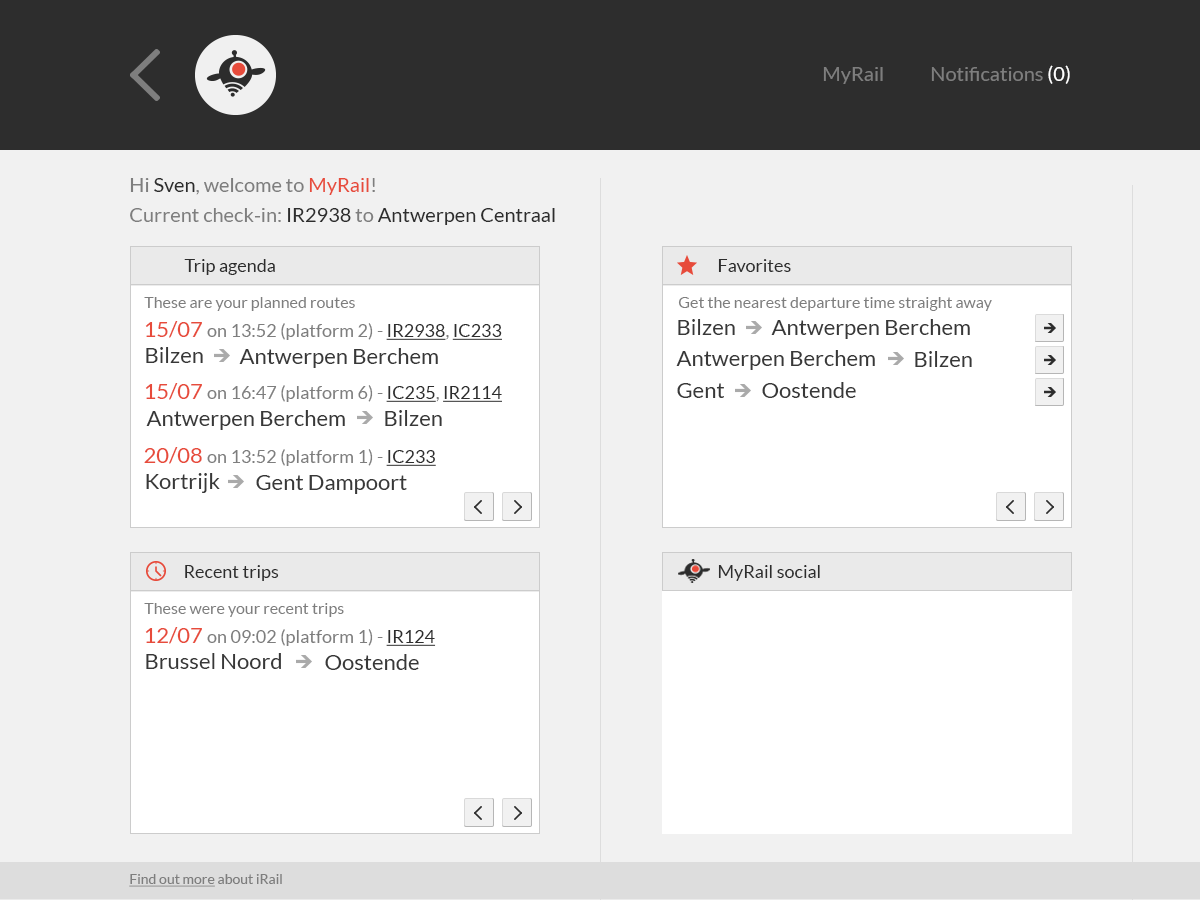
<style>
.page{position:relative;width:1200px;height:900px;background:#f1f1f1}
.page>*{position:absolute;margin:0}
.t1{font:20px "Lato-Regular";color:#7e7e7e}
.t2{font:20px "Lato-Regular";color:#ffffff}
.t3{font:20px/30px "Lato-Regular";color:#7e7e7e}
.t4{font:20px/30px "Lato-Regular";color:#2d2d2d}
.t5{font:20px/30px "Lato-Regular";color:#e74b3b}
.t6{font:18px "Lato-Regular";color:#2d2d2d}
.t7{font:16px "Lato-Regular";color:#7e7e7e}
.t8{font:18px "Lato-Regular";color:#7e7e7e}
.t9{font:22px "Lato-Regular";color:#e74b3b}
.t10{font:18px "Lato-Regular";color:#2d2d2d;text-decoration:underline}
.t11{font:22px "Lato-Regular";color:#383838}
.t12{font:14px "Lato-Regular";color:#7e7e7e;text-decoration:underline}
.t13{font:14px "Lato-Regular";color:#7e7e7e}
</style>
<div class="page">
<p class="t1" style="left:931px;top:65px;width:139px;height:19px">Notifications <span class="t2">(0)</span></p>
<p class="t1" style="left:823px;top:67px;width:60px;height:17px">MyRail</p>
<p class="t3" style="left:130px;top:178px;width:425px;height:47px">Hi <span class="t4">Sven</span>, welcome to <span class="t5">MyRail</span>!<br>Current check-in: <span class="t4">IR2938</span> to <span class="t4">Antwerpen Centraal</span></p>
<p class="t6" style="left:184px;top:259px;width:91px;height:16px">Trip agenda</p>
<p class="t6" style="left:718px;top:259px;width:73px;height:13px">Favorites</p>
<p class="t7" style="left:144px;top:297px;width:211px;height:14px">These are your planned routes</p>
<p class="t7" style="left:678px;top:297px;width:314px;height:14px">Get the nearest departure time straight away</p>
<p class="t8" style="left:145px;top:321px;width:357px;height:19px"><span class="t9">15/07 </span>on 13:52 (platform 2) - <span class="t10">IR2938</span>, <span class="t10">IC233</span></p>
<p class="t11" style="left:678px;top:319px;width:57px;height:16px">Bilzen</p>
<p class="t11" style="left:771px;top:319px;width:199px;height:20px">Antwerpen Berchem</p>
<p class="t11" style="left:146px;top:347px;width:57px;height:16px">Bilzen</p>
<p class="t11" style="left:239px;top:348px;width:199px;height:20px">Antwerpen Berchem</p>
<p class="t11" style="left:676px;top:350px;width:199px;height:20px">Antwerpen Berchem</p>
<p class="t11" style="left:915px;top:351px;width:57px;height:16px">Bilzen</p>
<p class="t8" style="left:145px;top:383px;width:357px;height:19px"><span class="t9">15/07 </span>on 16:47 (platform 6) - <span class="t10">IC235</span>, <span class="t10">IR2114</span></p>
<p class="t11" style="left:677px;top:383px;width:47px;height:15px">Gent</p>
<p class="t11" style="left:762px;top:382px;width:94px;height:16px">Oostende</p>
<p class="t11" style="left:146px;top:410px;width:199px;height:20px">Antwerpen Berchem</p>
<p class="t11" style="left:385px;top:410px;width:57px;height:16px">Bilzen</p>
<p class="t8" style="left:144px;top:447px;width:292px;height:19px"><span class="t9">20/08 </span>on 13:52 (platform 1) - <span class="t10">IC233</span></p>
<p class="t11" style="left:146px;top:473px;width:74px;height:20px">Kortrijk</p>
<p class="t11" style="left:256px;top:475px;width:151px;height:19px">Gent Dampoort</p>
<p class="t6" style="left:185px;top:565px;width:94px;height:16px">Recent trips</p>
<p class="t6" style="left:718px;top:565px;width:102px;height:16px">MyRail social</p>
<p class="t7" style="left:144px;top:603px;width:200px;height:14px">These were your recent trips</p>
<p class="t8" style="left:145px;top:627px;width:291px;height:19px"><span class="t9">12/07 </span>on 09:02 (platform 1) - <span class="t10">IR124</span></p>
<p class="t11" style="left:146px;top:653px;width:135px;height:16px">Brussel Noord</p>
<p class="t11" style="left:325px;top:654px;width:94px;height:16px">Oostende</p>
<p class="t12" style="left:129px;top:874px;width:153px;height:13px">Find out more<span class="t13"> about iRail</span></p>
</div>
